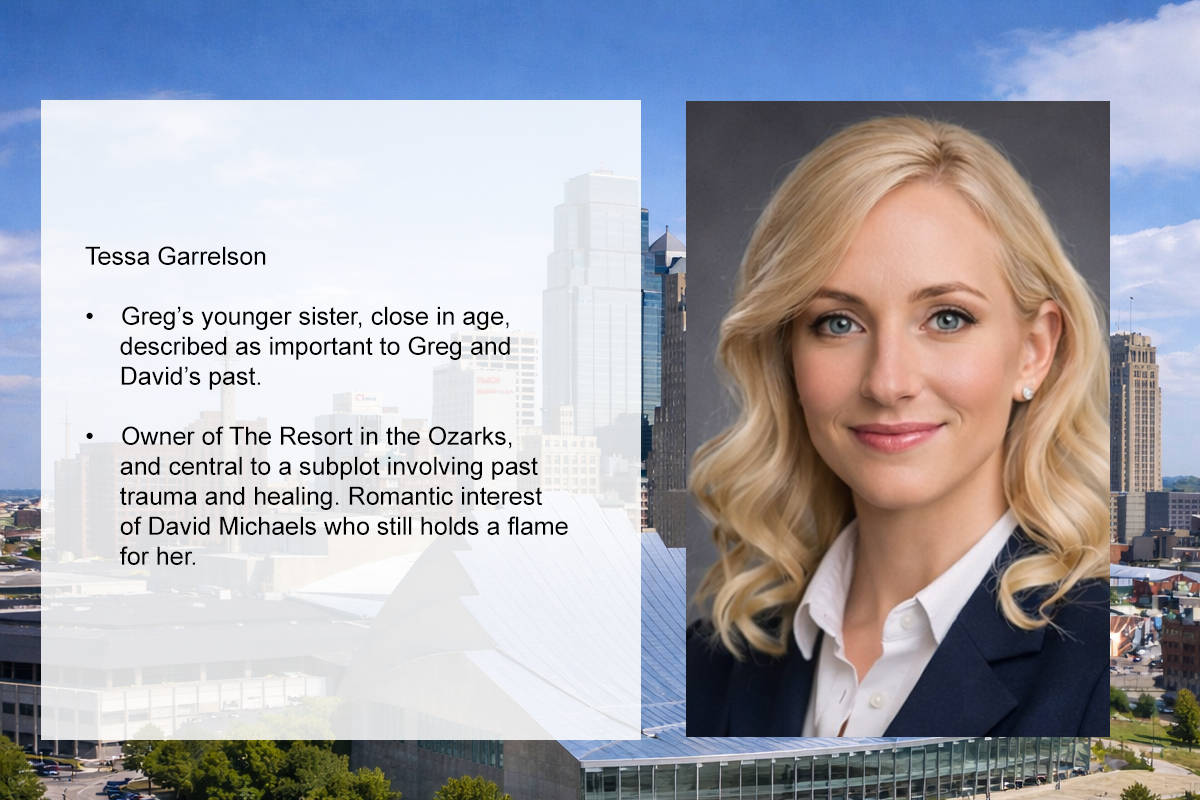
<style>
.page{position:relative;width:1200px;height:800px}
.page>*{position:absolute;margin:0}
.t1{font:25px "ArialMT";color:#000000}
</style>
<div class="page">
<p class="t1" style="left:85px;top:246px;width:483px;height:319px">Tessa Garrelson<br><br>• Greg’s younger sister, close in age, <br>     described as important to Greg and <br>     David’s past.<br><br>• Owner of The Resort in the Ozarks, <br>     and central to a subplot involving past<br>     trauma and healing. Romantic interest <br>     of David Michaels who still holds a flame <br>     for her.</p>
</div>
